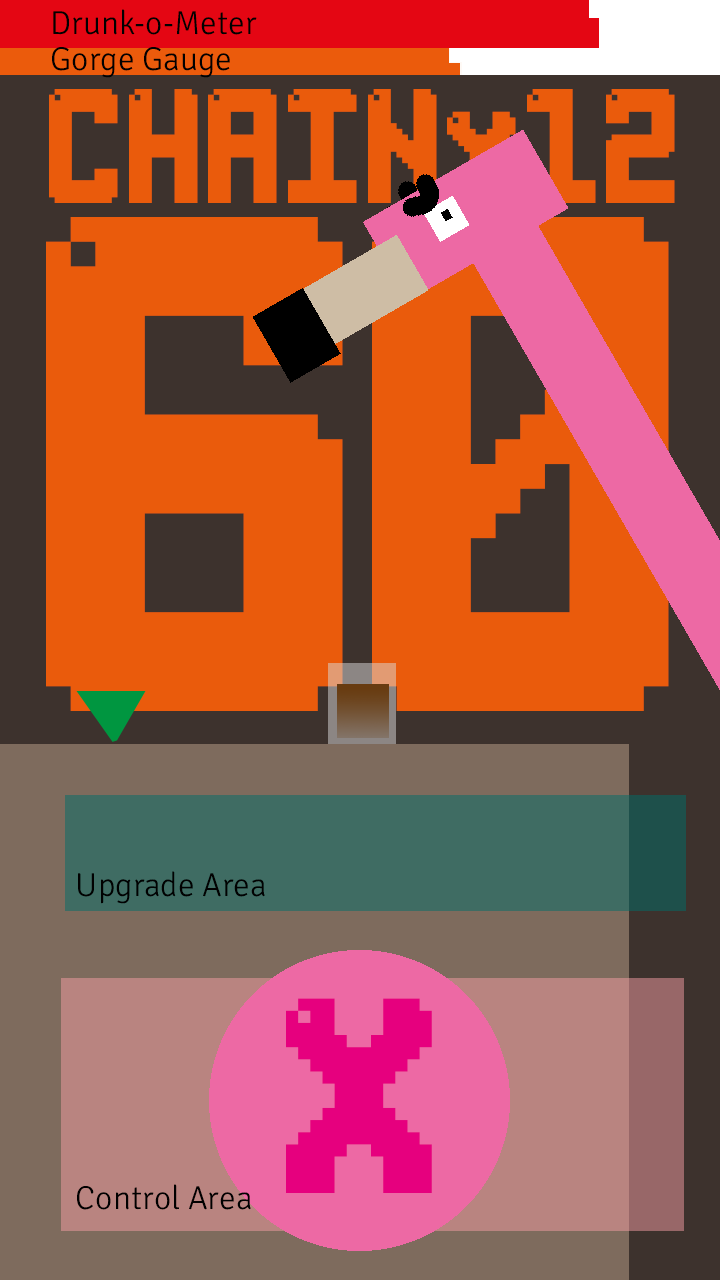
<style>
.page{position:relative;width:720px;height:1280px;background:#ea5b0c}
.page>*{position:absolute;margin:0}
.t1{font:33.3px "SignikaNegative-Light";color:#010101}
.t2{font:113.8px "LightPixel-7";color:#ea5b0c}
.t3{font:493.8px "LightPixel-7";color:#ea5b0c}
.t4{font:33.3px "SignikaNegative-Light";color:#000000}
</style>
<div class="page">
<p class="t1" style="left:53px;top:9px;width:204px;height:26px">Drunk-o-Meter</p>
<p class="t1" style="left:52px;top:47px;width:178px;height:31px">Gorge Gauge</p>
<p class="t2" style="left:49px;top:89px;width:626px;height:114px">CHAINx12</p>
<p class="t3" style="left:46px;top:217px;width:623px;height:494px">60</p>
<p class="t1" style="left:78px;top:871px;width:187px;height:33px">Upgrade Area</p>
<p class="t4" style="left:77px;top:1184px;width:174px;height:26px">Control Area</p>
</div>
